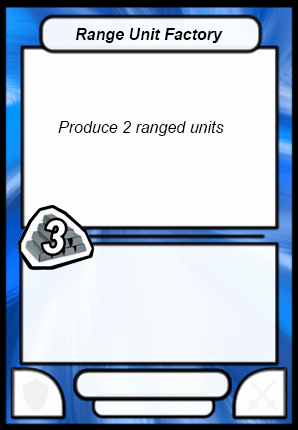
<style>
.page{position:relative;width:298px;height:430px;background:#fdfdfd}
.page>*{position:absolute;margin:0}
.t1{font:16px "Arial-BoldItalicMT";color:#000000}
.t2{font:16px "Arial-ItalicMT";color:#000000}
</style>
<div class="page">
<p class="t1" style="left:76px;top:28px;width:147px;height:15px">Range Unit Factory</p>
<p class="t2" style="left:58px;top:121px;width:166px;height:15px">Produce 2 ranged units</p>
</div>
